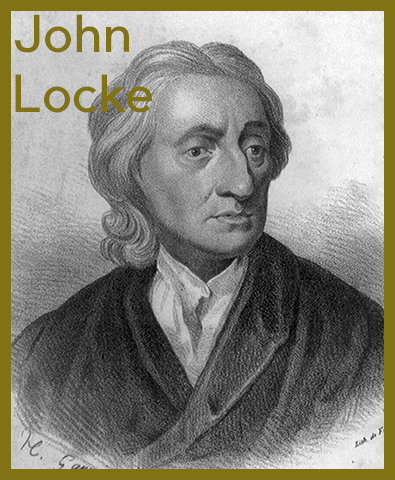
<style>
.page{position:relative;width:395px;height:480px}
.page>*{position:absolute;margin:0}
.t1{font:50px "PierSans";color:#807215}
</style>
<div class="page">
<p class="t1" style="left:15px;top:14px;width:137px;height:99px">John<br>Locke</p>
</div>
